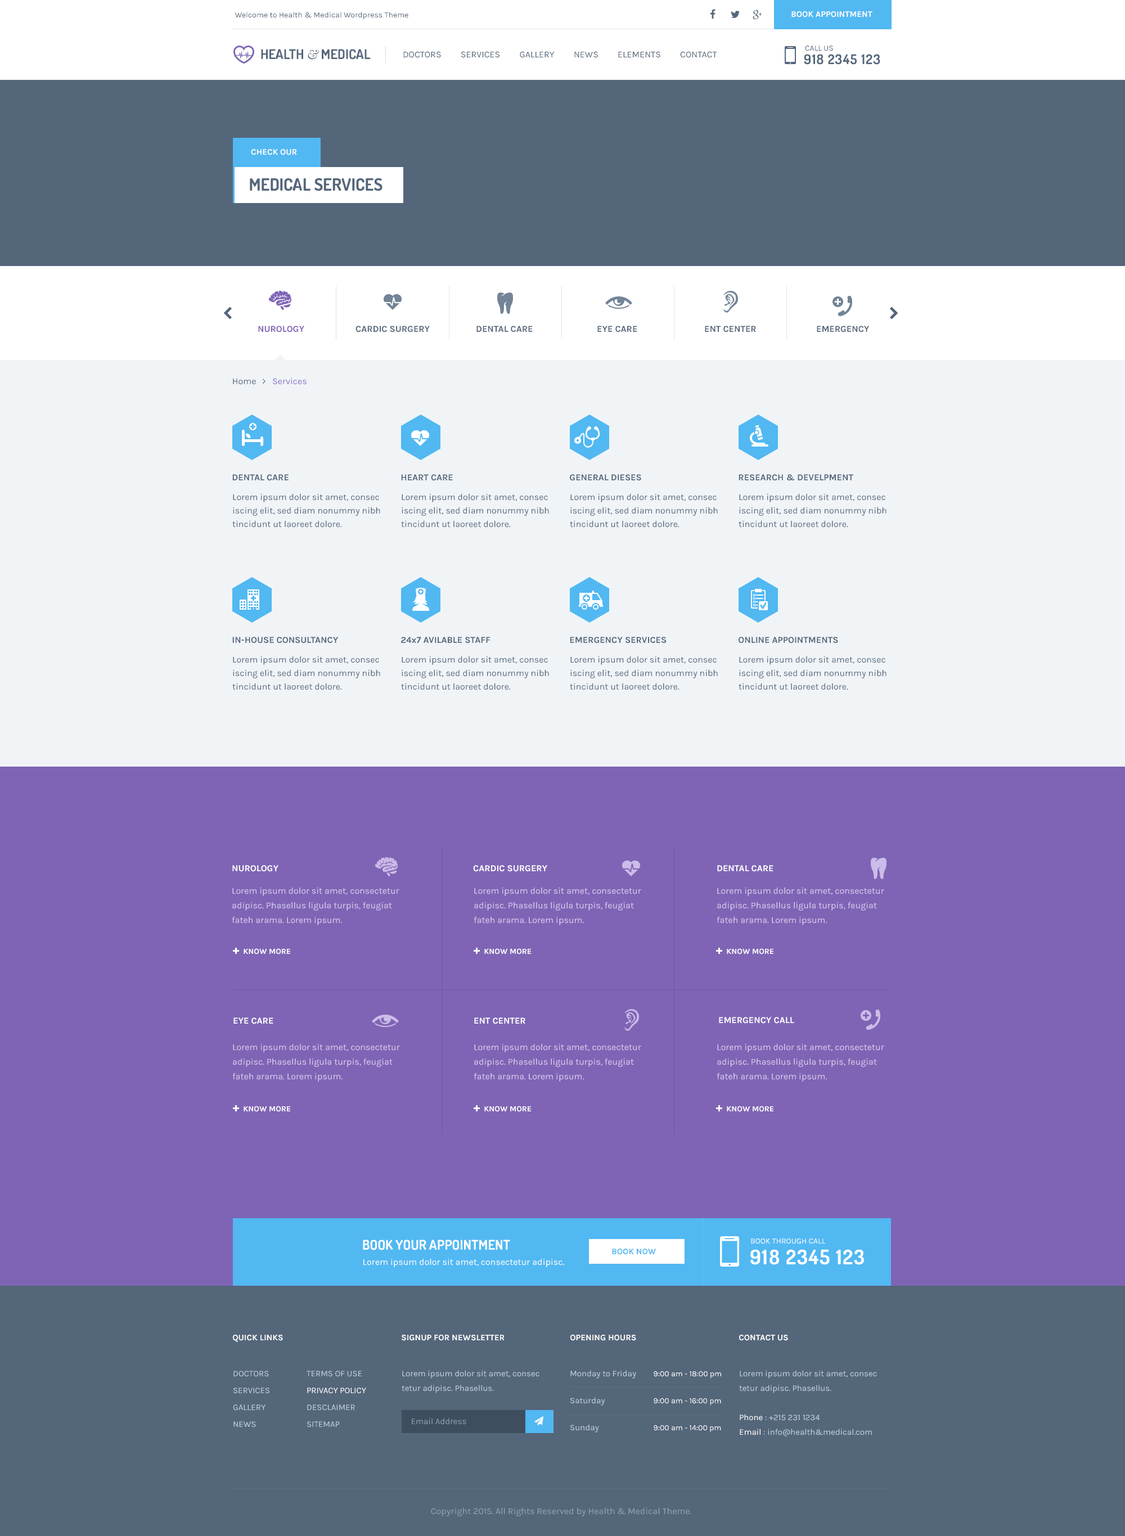
<style>
.page{position:relative;width:1125px;height:1536px;background:#7f64b5}
.page>*{position:absolute;margin:0}
.t1{font:7.9px "Karla-Regular";color:#54667a}
.t2{font:8.4px "Karla-Bold";color:#ffffff;text-transform:uppercase}
.t3{font:13.5px "Dosis-Bold";color:#54667a}
.t4{font:13.5px "Baskerville-Italic";color:#54667a}
.t5{font:9px "Karla-Regular";color:#54667a;text-transform:uppercase}
.t6{font:13.5px "Dosis-Bold";letter-spacing:0.05em;color:#54667a}
.t7{font:16.9px "Dosis-Bold";color:#54667a}
.t8{font:9px "Karla-Bold";color:#7f64b5;text-transform:uppercase}
.t9{font:9px "Karla-Bold";color:#54667a;text-transform:uppercase}
.t10{font:9px "Karla-Bold";color:#54667a}
.t11{font:9px/13.5px "Karla-Regular";color:#54667a}
.t12{font:9px "Karla-Bold";color:#ffffff;text-transform:uppercase}
.t13{font:9px/14.6px "Karla-Regular";color:#d7ccee}
.t14{font:13.5px "Dosis-Bold";color:#ffffff}
.t15{font:7.9px "Karla-Regular";color:#ffffff}
.t16{font:8.4px "Karla-Bold";color:#51b8f2;text-transform:uppercase}
.t17{font:20.2px "Dosis-Bold";letter-spacing:0.05em;color:#ffffff}
.t18{font:9px "Karla-Regular";color:#ffffff}
.t19{font:8.4px/16.9px "Karla-Regular";color:#c2cfde;text-transform:uppercase}
.t20{font:8.4px/16.9px "Karla-Regular";color:#ffffff;text-transform:uppercase}
.t21{font:8.4px/14.6px "Karla-Regular";color:#c2cfde}
.t22{font:8.4px/27px "Karla-Regular";color:#c2cfde}
.t23{font:7.9px/27px "Karla-Regular";color:#ffffff}
.t24{font:8.4px/14.6px "Karla-Regular";color:#ffffff}
.t25{font:8.4px "Karla-Regular";color:#8e9fb2}
.t26{font:9px "Karla-Regular";color:#8fa1b5}
</style>
<div class="page">
<p class="t1" style="left:235px;top:12px;width:173px;height:8px">Welcome to Health &amp; Medical Wordpress Theme</p>
<p class="t2" style="left:791px;top:11px;width:81px;height:6px">BOOK APPOINTMENT</p>
<p class="t3" style="left:261px;top:49px;width:110px;height:11px">HEALTH <span class="t4">&amp;</span> MEDICAL</p>
<p class="t5" style="left:403px;top:51px;width:314px;height:7px">Doctors         Services         Gallery         News         Elements         Contact</p>
<p class="t6" style="left:804px;top:54px;width:76px;height:11px">918 2345 123</p>
<p class="t1" style="left:805px;top:46px;width:28px;height:5px">CALL US</p>
<p class="t2" style="left:251px;top:149px;width:46px;height:6px">CHECK OUR</p>
<p class="t7" style="left:250px;top:178px;width:132px;height:13px">MEDICAL SERVICES</p>
<p class="t8" style="left:258px;top:326px;width:46px;height:6px">NUROLOGY</p>
<p class="t9" style="left:356px;top:326px;width:74px;height:6px">CARDIC SURGERY</p>
<p class="t9" style="left:476px;top:326px;width:57px;height:6px">DENTAL CARE</p>
<p class="t9" style="left:597px;top:326px;width:40px;height:6px">EYE CARE</p>
<p class="t9" style="left:705px;top:326px;width:51px;height:6px">ENT CENTER</p>
<p class="t9" style="left:817px;top:326px;width:53px;height:6px">EMERGENCY</p>
<p class="t10" style="left:232px;top:474px;width:57px;height:7px">DENTAL CARE</p>
<p class="t10" style="left:401px;top:474px;width:52px;height:7px">HEART CARE</p>
<p class="t10" style="left:570px;top:474px;width:71px;height:7px">GENERAL DIESES</p>
<p class="t10" style="left:739px;top:474px;width:114px;height:7px">RESEARCH &amp; DEVELPMENT</p>
<p class="t11" style="left:232px;top:494px;width:148px;height:34px">Lorem ipsum dolor sit amet, consec<br>iscing elit, sed diam nonummy nibh<br>tincidunt ut laoreet dolore.</p>
<p class="t11" style="left:401px;top:494px;width:148px;height:34px">Lorem ipsum dolor sit amet, consec<br>iscing elit, sed diam nonummy nibh<br>tincidunt ut laoreet dolore.</p>
<p class="t11" style="left:570px;top:494px;width:148px;height:34px">Lorem ipsum dolor sit amet, consec<br>iscing elit, sed diam nonummy nibh<br>tincidunt ut laoreet dolore.</p>
<p class="t11" style="left:739px;top:494px;width:147px;height:34px">Lorem ipsum dolor sit amet, consec<br>iscing elit, sed diam nonummy nibh<br>tincidunt ut laoreet dolore.</p>
<p class="t10" style="left:232px;top:637px;width:107px;height:7px">IN-HOUSE CONSULTANCY</p>
<p class="t10" style="left:401px;top:637px;width:89px;height:7px">24x7 AVILABLE STAFF</p>
<p class="t10" style="left:570px;top:637px;width:97px;height:7px">EMERGENCY SERVICES</p>
<p class="t10" style="left:739px;top:637px;width:99px;height:7px">ONLINE APPOINTMENTS</p>
<p class="t11" style="left:232px;top:656px;width:148px;height:34px">Lorem ipsum dolor sit amet, consec<br>iscing elit, sed diam nonummy nibh<br>tincidunt ut laoreet dolore.</p>
<p class="t11" style="left:401px;top:656px;width:148px;height:34px">Lorem ipsum dolor sit amet, consec<br>iscing elit, sed diam nonummy nibh<br>tincidunt ut laoreet dolore.</p>
<p class="t11" style="left:570px;top:656px;width:148px;height:34px">Lorem ipsum dolor sit amet, consec<br>iscing elit, sed diam nonummy nibh<br>tincidunt ut laoreet dolore.</p>
<p class="t11" style="left:739px;top:656px;width:147px;height:34px">Lorem ipsum dolor sit amet, consec<br>iscing elit, sed diam nonummy nibh<br>tincidunt ut laoreet dolore.</p>
<p class="t12" style="left:232px;top:865px;width:46px;height:7px">NUROLOGY</p>
<p class="t12" style="left:473px;top:865px;width:74px;height:7px">CARDIC SURGERY</p>
<p class="t12" style="left:717px;top:865px;width:56px;height:7px">DENTAL CARE</p>
<p class="t13" style="left:232px;top:888px;width:167px;height:37px">Lorem ipsum dolor sit amet, consectetur <br>adipisc. Phasellus ligula turpis, feugiat <br>fateh arama. Lorem ipsum.</p>
<p class="t13" style="left:474px;top:888px;width:167px;height:37px">Lorem ipsum dolor sit amet, consectetur <br>adipisc. Phasellus ligula turpis, feugiat <br>fateh arama. Lorem ipsum.</p>
<p class="t13" style="left:717px;top:888px;width:167px;height:37px">Lorem ipsum dolor sit amet, consectetur <br>adipisc. Phasellus ligula turpis, feugiat <br>fateh arama. Lorem ipsum.</p>
<p class="t12" style="left:233px;top:1018px;width:40px;height:6px">EYE CARE</p>
<p class="t12" style="left:474px;top:1018px;width:51px;height:6px">ENT CENTER</p>
<p class="t12" style="left:719px;top:1017px;width:75px;height:7px">EMERGENCY CALL</p>
<p class="t13" style="left:232px;top:1044px;width:168px;height:38px">Lorem ipsum dolor sit amet, consectetur <br>adipisc. Phasellus ligula turpis, feugiat <br>fateh arama. Lorem ipsum.</p>
<p class="t13" style="left:474px;top:1044px;width:167px;height:38px">Lorem ipsum dolor sit amet, consectetur <br>adipisc. Phasellus ligula turpis, feugiat <br>fateh arama. Lorem ipsum.</p>
<p class="t13" style="left:717px;top:1044px;width:167px;height:38px">Lorem ipsum dolor sit amet, consectetur <br>adipisc. Phasellus ligula turpis, feugiat <br>fateh arama. Lorem ipsum.</p>
<p class="t14" style="left:363px;top:1240px;width:147px;height:10px">BOOK YOUR APPOINTMENT</p>
<p class="t15" style="left:751px;top:1239px;width:75px;height:5px">BOOK THROUGH CALL</p>
<p class="t16" style="left:612px;top:1249px;width:44px;height:6px">BOOK NOW</p>
<p class="t17" style="left:750px;top:1249px;width:114px;height:16px">918 2345 123</p>
<p class="t18" style="left:363px;top:1259px;width:201px;height:8px">Lorem ipsum dolor sit amet, consectetur adipisc.</p>
<p class="t2" style="left:233px;top:1335px;width:50px;height:7px">QUICK LINKS</p>
<p class="t2" style="left:402px;top:1335px;width:103px;height:6px">Signup For Newsletter</p>
<p class="t2" style="left:570px;top:1335px;width:66px;height:6px">Opening Hours</p>
<p class="t2" style="left:739px;top:1335px;width:49px;height:6px">Contact Us</p>
<p class="t19" style="left:233px;top:1371px;width:36px;height:57px">Doctors         <br>Services         <br>Gallery         <br>News</p>
<p class="t19" style="left:307px;top:1371px;width:59px;height:57px">Terms of Use<br><span class="t20">Privacy Policy<br></span>Desclaimer<br>Sitemap</p>
<p class="t21" style="left:402px;top:1370px;width:137px;height:23px">Lorem ipsum dolor sit amet, consec<br>tetur adipisc. Phasellus.</p>
<p class="t22" style="left:570px;top:1370px;width:66px;height:63px">Monday to Friday<br>Saturday<br>Sunday</p>
<p class="t23" style="left:654px;top:1371px;width:67px;height:62px">9:00 am - 18:00 pm<br>9:00 am - 16:00 pm<br>9:00 am - 14:00 pm</p>
<p class="t21" style="left:739px;top:1370px;width:138px;height:67px">Lorem ipsum dolor sit amet, consec<br>tetur adipisc. Phasellus.<br><br><span class="t24">Phone</span> : +215 231 1234<br><span class="t24">Email</span> : info@health&amp;medical.com</p>
<p class="t25" style="left:412px;top:1418px;width:54px;height:7px">Email Address</p>
<p class="t26" style="left:431px;top:1508px;width:260px;height:8px">Copyright 2015. All Rights Reserved by Health &amp; Medical Theme.</p>
</div>
